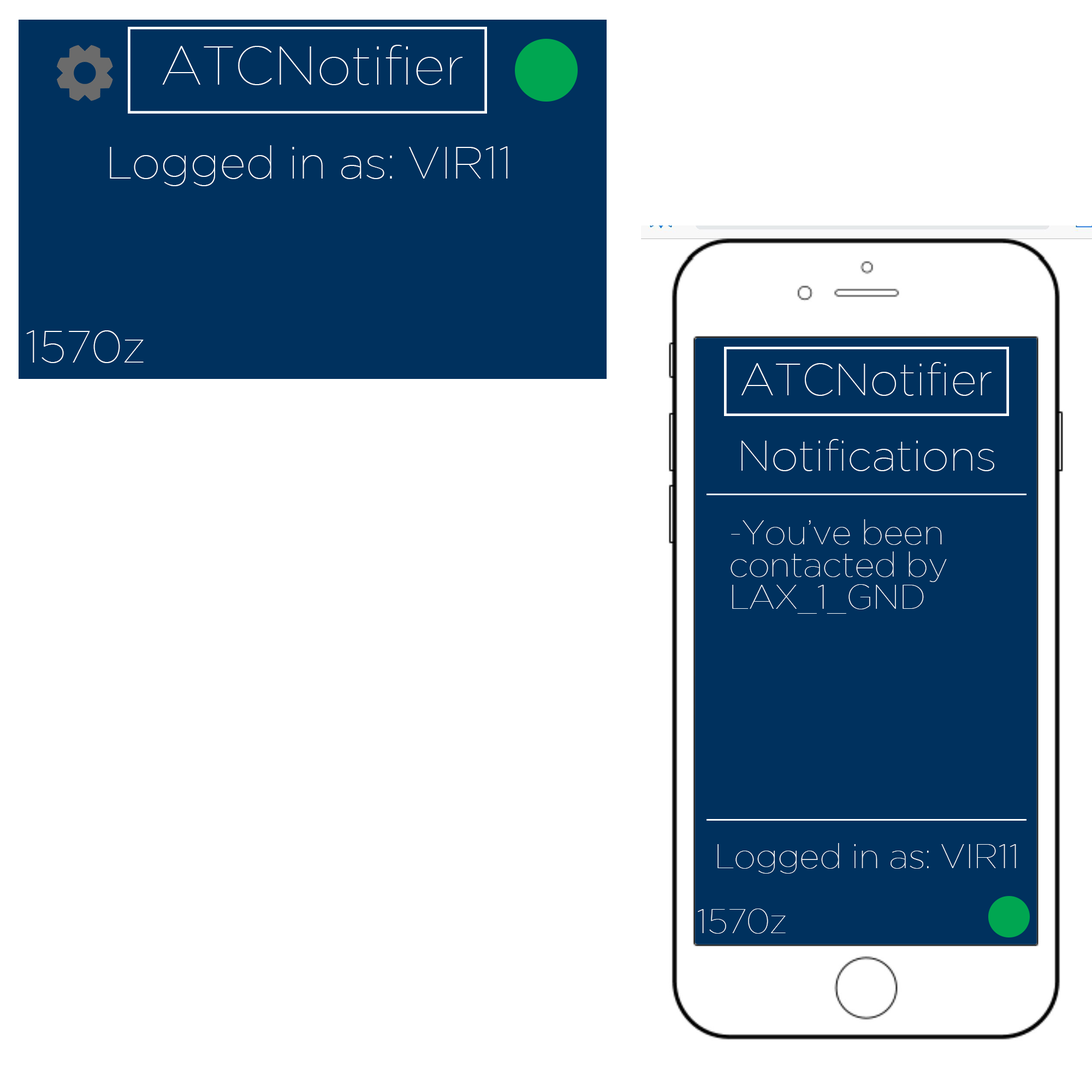
<style>
.page{position:relative;width:1092px;height:1092px;background:#ffffff}
.page>*{position:absolute;margin:0}
.t1{font:54.6px "GothamThin";color:#ffffff}
.t2{font:45.5px "GothamThin";color:#ffffff}
.t3{font:43.2px "GothamThin";color:#ffffff}
.t4{font:34.1px/31.8px "GothamThin";color:#ffffff}
.t5{font:34.1px "GothamThin";color:#ffffff}
</style>
<div class="page">
<p class="t1" style="left:162px;top:45px;width:300px;height:40px">ATCNotifier</p>
<p class="t2" style="left:110px;top:145px;width:398px;height:41px">Logged in as: VIR11</p>
<p class="t2" style="left:26px;top:330px;width:118px;height:33px">1570z</p>
<p class="t2" style="left:741px;top:362px;width:251px;height:34px">ATCNotifier</p>
<p class="t3" style="left:741px;top:439px;width:253px;height:32px">Notifications</p>
<p class="t4" style="left:731px;top:519px;width:216px;height:95px">-You’ve been<br>contacted by<br>LAX_1_GND</p>
<p class="t5" style="left:717px;top:843px;width:299px;height:31px">Logged in as: VIR11</p>
<p class="t5" style="left:698px;top:909px;width:88px;height:25px">1570z</p>
</div>
